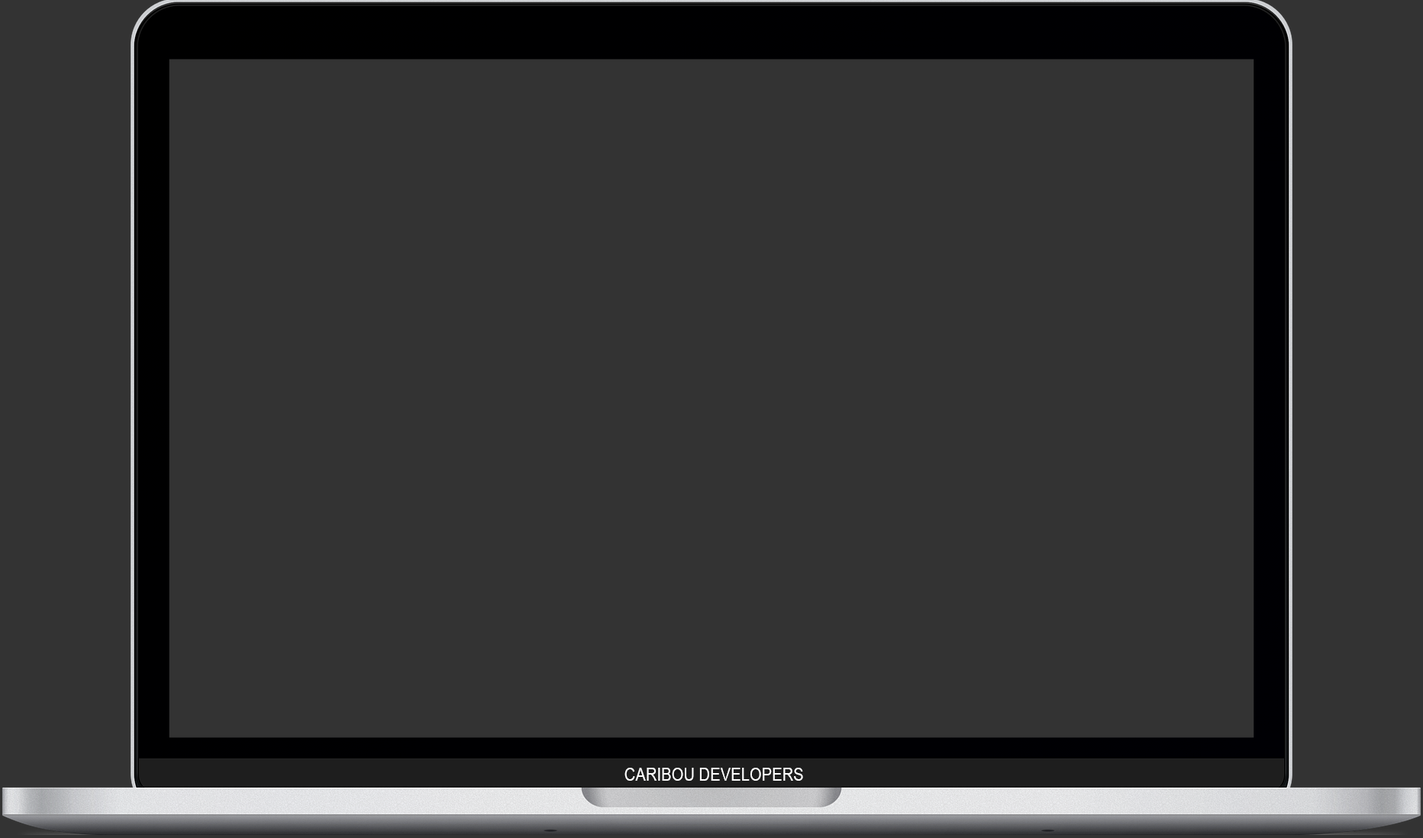
<style>
.page{position:relative;width:1423px;height:838px;background:#333333}
.page>*{position:absolute;margin:0}
.t1{font:17.3px "ArialMT";color:#fefefe;scale:0.89 1}
</style>
<div class="page">
<p class="t1" style="left:625px;top:767px;width:178px;height:13px">CARIBOU DEVELOPERS</p>
</div>
